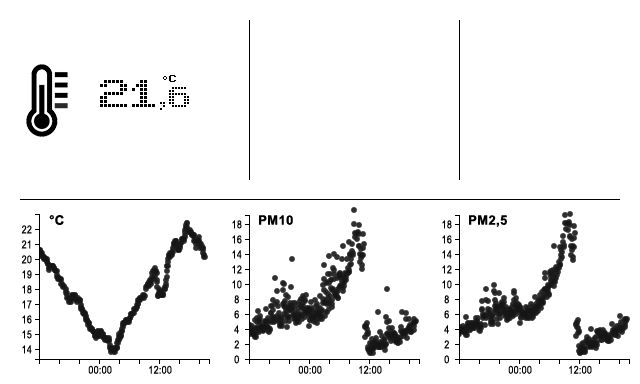
<style>
.page{position:relative;width:640px;height:384px;background:#ffffff}
.page>*{position:absolute;margin:0}
.t1{font:8.7px "BoldLEDBoard-7";letter-spacing:0.025em;color:#000000}
.t2{font:32.7px "BoldLEDBoard-7";letter-spacing:0.025em;color:#000000}
.t3{font:13.1px "Arial-BoldMT";letter-spacing:0.025em;color:#000000}
.t4{font:10.9px "ArialNarrow";letter-spacing:0.025em;color:#000000}
</style>
<div class="page">
<p class="t1" style="left:163px;top:75px;width:13px;height:7px">°C</p>
<p class="t2" style="left:100px;top:80px;width:55px;height:27px">21</p>
<p class="t3" style="left:49px;top:215px;width:15px;height:10px">°C</p>
<p class="t4" style="left:232px;top:220px;width:10px;height:9px">18</p>
<p class="t3" style="left:259px;top:215px;width:34px;height:10px">PM10</p>
<p class="t4" style="left:442px;top:220px;width:10px;height:9px">18</p>
<p class="t3" style="left:469px;top:215px;width:38px;height:12px">PM2,5</p>
<p class="t4" style="left:21px;top:225px;width:11px;height:9px">22</p>
<p class="t4" style="left:21px;top:240px;width:10px;height:9px">21</p>
<p class="t4" style="left:232px;top:235px;width:10px;height:9px">16</p>
<p class="t4" style="left:442px;top:235px;width:10px;height:9px">16</p>
<p class="t4" style="left:21px;top:255px;width:11px;height:9px">20</p>
<p class="t4" style="left:232px;top:250px;width:10px;height:9px">14</p>
<p class="t4" style="left:442px;top:250px;width:10px;height:9px">14</p>
<p class="t4" style="left:22px;top:270px;width:10px;height:9px">19</p>
<p class="t4" style="left:232px;top:265px;width:10px;height:9px">12</p>
<p class="t4" style="left:442px;top:265px;width:10px;height:9px">12</p>
<p class="t4" style="left:232px;top:280px;width:10px;height:9px">10</p>
<p class="t4" style="left:442px;top:280px;width:10px;height:9px">10</p>
<p class="t4" style="left:22px;top:285px;width:10px;height:9px">18</p>
<p class="t4" style="left:22px;top:300px;width:10px;height:9px">17</p>
<p class="t4" style="left:234px;top:295px;width:5px;height:9px">8</p>
<p class="t4" style="left:444px;top:295px;width:5px;height:9px">8</p>
<p class="t4" style="left:22px;top:315px;width:10px;height:9px">16</p>
<p class="t4" style="left:234px;top:310px;width:5px;height:9px">6</p>
<p class="t4" style="left:444px;top:310px;width:5px;height:9px">6</p>
<p class="t4" style="left:234px;top:325px;width:5px;height:9px">4</p>
<p class="t4" style="left:444px;top:325px;width:5px;height:9px">4</p>
<p class="t4" style="left:22px;top:330px;width:10px;height:9px">15</p>
<p class="t4" style="left:234px;top:340px;width:5px;height:9px">2</p>
<p class="t4" style="left:444px;top:340px;width:5px;height:9px">2</p>
<p class="t4" style="left:22px;top:345px;width:10px;height:9px">14</p>
<p class="t4" style="left:88px;top:365px;width:24px;height:9px">00:00</p>
<p class="t4" style="left:149px;top:365px;width:23px;height:9px">12:00</p>
<p class="t4" style="left:234px;top:355px;width:5px;height:9px">0</p>
<p class="t4" style="left:298px;top:365px;width:24px;height:9px">00:00</p>
<p class="t4" style="left:359px;top:365px;width:23px;height:9px">12:00</p>
<p class="t4" style="left:444px;top:355px;width:5px;height:9px">0</p>
<p class="t4" style="left:508px;top:365px;width:24px;height:9px">00:00</p>
<p class="t4" style="left:569px;top:365px;width:23px;height:9px">12:00</p>
</div>
